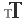
<style>
.page{position:relative;width:26px;height:22px;background:#ffffff}
.page>*{position:absolute;margin:0}
.t1{font:24px "TimesNewRomanPS-BoldMT";color:#2e2e2e}
.t2{font:12px "TimesNewRomanPS-BoldMT";color:#858585}
</style>
<div class="page">
<p class="t1" style="left:9px;top:2px;width:13px;height:16px">T</p>
<p class="t2" style="left:4px;top:9px;width:8px;height:9px">T</p>
</div>
